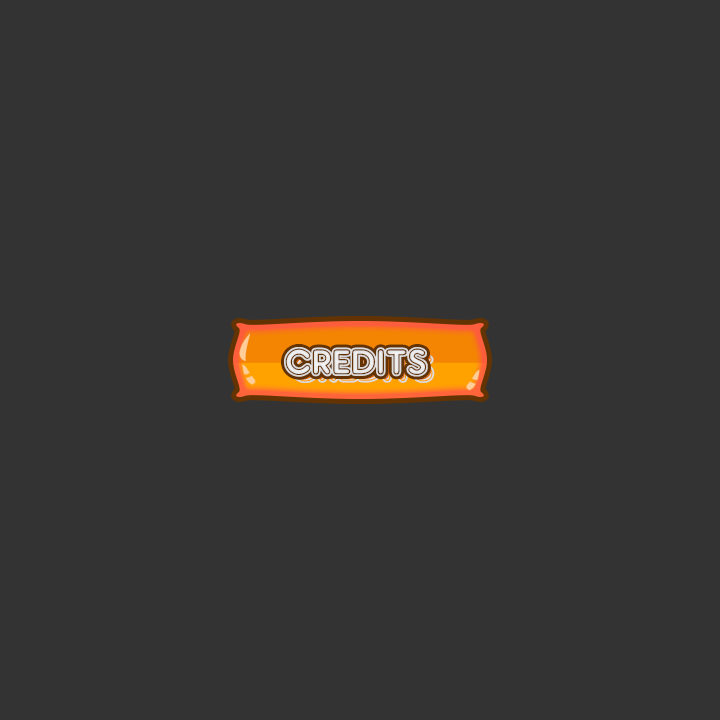
<style>
.page{position:relative;width:720px;height:720px;background:#333333}
.page>*{position:absolute;margin:0}
.t1{font:52.9px "ARDELANEY";letter-spacing:-0.075em;color:#e7e7e7}
</style>
<div class="page">
<p class="t1" style="left:284px;top:347px;width:144px;height:30px">credits</p>
</div>
